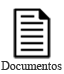
<style>
.page{position:relative;width:64px;height:74px;background:#ffffff}
.page>*{position:absolute;margin:0}
.t1{font:12px "TimesNewRomanPSMT";color:#333333}
</style>
<div class="page">
<p class="t1" style="left:1px;top:61px;width:61px;height:9px">Documentos</p>
</div>
